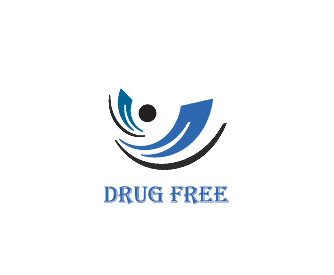
<style>
.page{position:relative;width:334px;height:275px;background:#ffffff}
.page>*{position:absolute;margin:0}
.t1{font:24px "Algerian";color:#2e68b1}
</style>
<div class="page">
<p class="t1" style="left:103px;top:186px;width:126px;height:19px">Drug Free</p>
</div>
